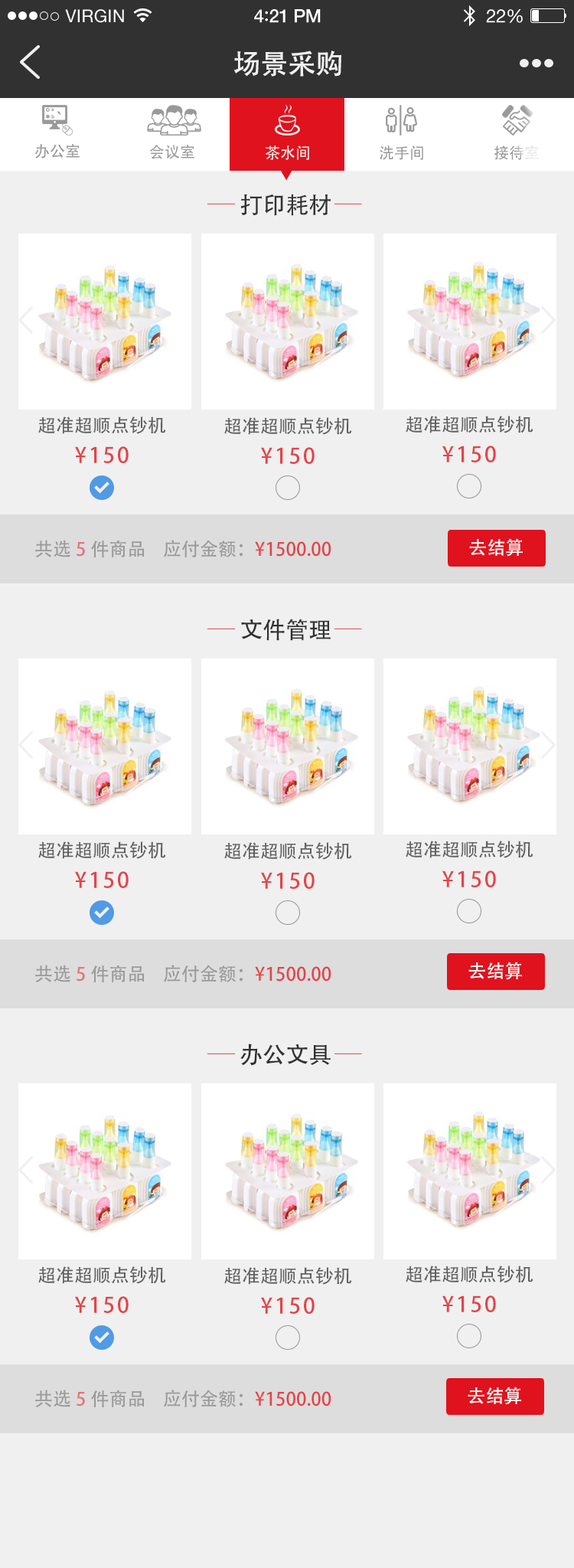
<style>
.page{position:relative;width:574px;height:1568px;background:#f0f0f0}
.page>*{position:absolute;margin:0}
.t1{font:27.6px "AdobeHeitiStd-Regular";color:#f0f0f0}
.t2{font:15.3px "AdobeHeitiStd-Regular";color:#999999}
.t3{font:15.3px "AdobeHeitiStd-Regular";color:#f0f0f0}
.t4{font:15.3px "AdobeHeitiStd-Regular"}
.t5{font:23px "AdobeHeitiStd-Regular";color:#323232}
.t6{font:18.4px "AdobeHeitiStd-Regular";color:#606060}
.t7{font:21.4px "AdobeHeitiStd-Regular";letter-spacing:0.1em;color:#e34449}
.t8{font:18.4px "AdobeHeitiStd-Regular";color:#999999}
.t9{font:18.4px "AdobeHeitiStd-Regular";color:#e67276}
.t10{font:18.4px "AdobeHeitiStd-Regular";color:#e34449}
.t11{font:18.4px "AdobeHeitiStd-Regular";color:#ffffff}
</style>
<div class="page">
<p class="t1" style="left:234px;top:51px;width:107px;height:26px">场景采购</p>
<p class="t2" style="left:34px;top:144px;width:46px;height:14px">办公室</p>
<p class="t2" style="left:149px;top:145px;width:45px;height:14px">会议室</p>
<p class="t3" style="left:266px;top:145px;width:43px;height:15px">茶水间</p>
<p class="t2" style="left:380px;top:145px;width:43px;height:15px">洗手间</p>
<p class="t4" style="left:495px;top:145px;width:44px;height:15px">接待室</p>
<p class="t5" style="left:240px;top:194px;width:91px;height:22px">打印耗材</p>
<p class="t6" style="left:38px;top:416px;width:128px;height:18px">超准超顺点钞机</p>
<p class="t6" style="left:224px;top:417px;width:128px;height:18px">超准超顺点钞机</p>
<p class="t6" style="left:406px;top:416px;width:128px;height:17px">超准超顺点钞机</p>
<p class="t7" style="left:75px;top:446px;width:54px;height:17px">¥150</p>
<p class="t7" style="left:261px;top:447px;width:54px;height:17px">¥150</p>
<p class="t7" style="left:443px;top:446px;width:53px;height:16px">¥150</p>
<p class="t8" style="left:35px;top:540px;width:110px;height:18px">共选<span class="t9">5</span>件商品</p>
<p class="t10" style="left:164px;top:540px;width:168px;height:17px"><span class="t8">应付金额：</span>¥1500.00</p>
<p class="t11" style="left:469px;top:538px;width:54px;height:19px">去结算</p>
<p class="t5" style="left:241px;top:619px;width:90px;height:22px">文件管理</p>
<p class="t6" style="left:38px;top:841px;width:128px;height:18px">超准超顺点钞机</p>
<p class="t6" style="left:224px;top:842px;width:128px;height:18px">超准超顺点钞机</p>
<p class="t6" style="left:406px;top:841px;width:128px;height:17px">超准超顺点钞机</p>
<p class="t7" style="left:75px;top:871px;width:54px;height:17px">¥150</p>
<p class="t7" style="left:261px;top:872px;width:54px;height:17px">¥150</p>
<p class="t7" style="left:443px;top:871px;width:53px;height:16px">¥150</p>
<p class="t8" style="left:35px;top:965px;width:110px;height:18px">共选<span class="t9">5</span>件商品</p>
<p class="t10" style="left:164px;top:965px;width:168px;height:17px"><span class="t8">应付金额：</span>¥1500.00</p>
<p class="t11" style="left:469px;top:962px;width:53px;height:18px">去结算</p>
<p class="t5" style="left:240px;top:1044px;width:91px;height:22px">办公文具</p>
<p class="t6" style="left:406px;top:1266px;width:128px;height:17px">超准超顺点钞机</p>
<p class="t6" style="left:38px;top:1266px;width:128px;height:18px">超准超顺点钞机</p>
<p class="t6" style="left:224px;top:1267px;width:128px;height:18px">超准超顺点钞机</p>
<p class="t7" style="left:75px;top:1296px;width:54px;height:17px">¥150</p>
<p class="t7" style="left:261px;top:1297px;width:54px;height:17px">¥150</p>
<p class="t7" style="left:443px;top:1295px;width:53px;height:17px">¥150</p>
<p class="t8" style="left:35px;top:1390px;width:110px;height:18px">共选<span class="t9">5</span>件商品</p>
<p class="t10" style="left:164px;top:1390px;width:168px;height:17px"><span class="t8">应付金额：</span>¥1500.00</p>
<p class="t11" style="left:468px;top:1387px;width:53px;height:18px">去结算</p>
</div>
